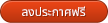
<style>
.page{position:relative;width:108px;height:23px}
.page>*{position:absolute;margin:0}
.t1{font:12px "NotoSansThai-Regular";color:#ffffff}
</style>
<div class="page">
<p class="t1" style="left:22px;top:6px;width:64px;height:10px">ลงประกาศฟรี</p>
</div>
